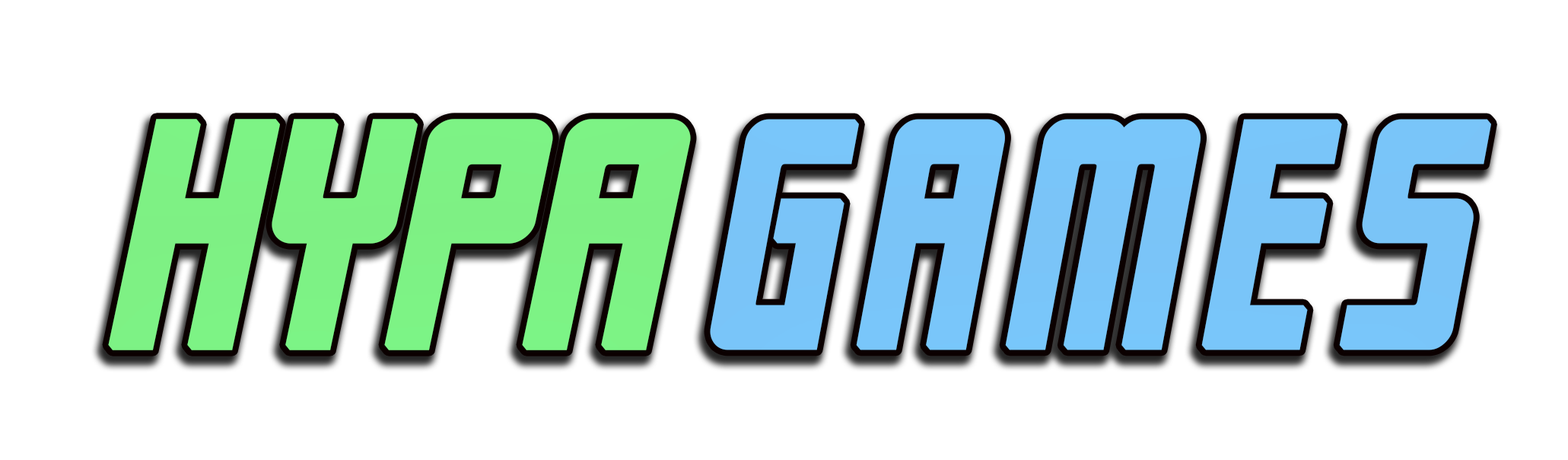
<style>
.page{position:relative;width:1568px;height:460px;background:#ffffff}
.page>*{position:absolute;margin:0}
.t1{font:317px "SFLaundromatic-BoldOblique";color:#7af888;font-weight:bold}
.t2{font:317px "SFLaundromatic-BoldOblique";letter-spacing:0.1em;color:#76caff;font-weight:bold;scale:0.88 1}
</style>
<div class="page">
<p class="t1" style="left:108px;top:119px;width:583px;height:231px">HYPA</p>
<p class="t2" style="left:710px;top:119px;width:781px;height:231px">GAMES</p>
</div>
